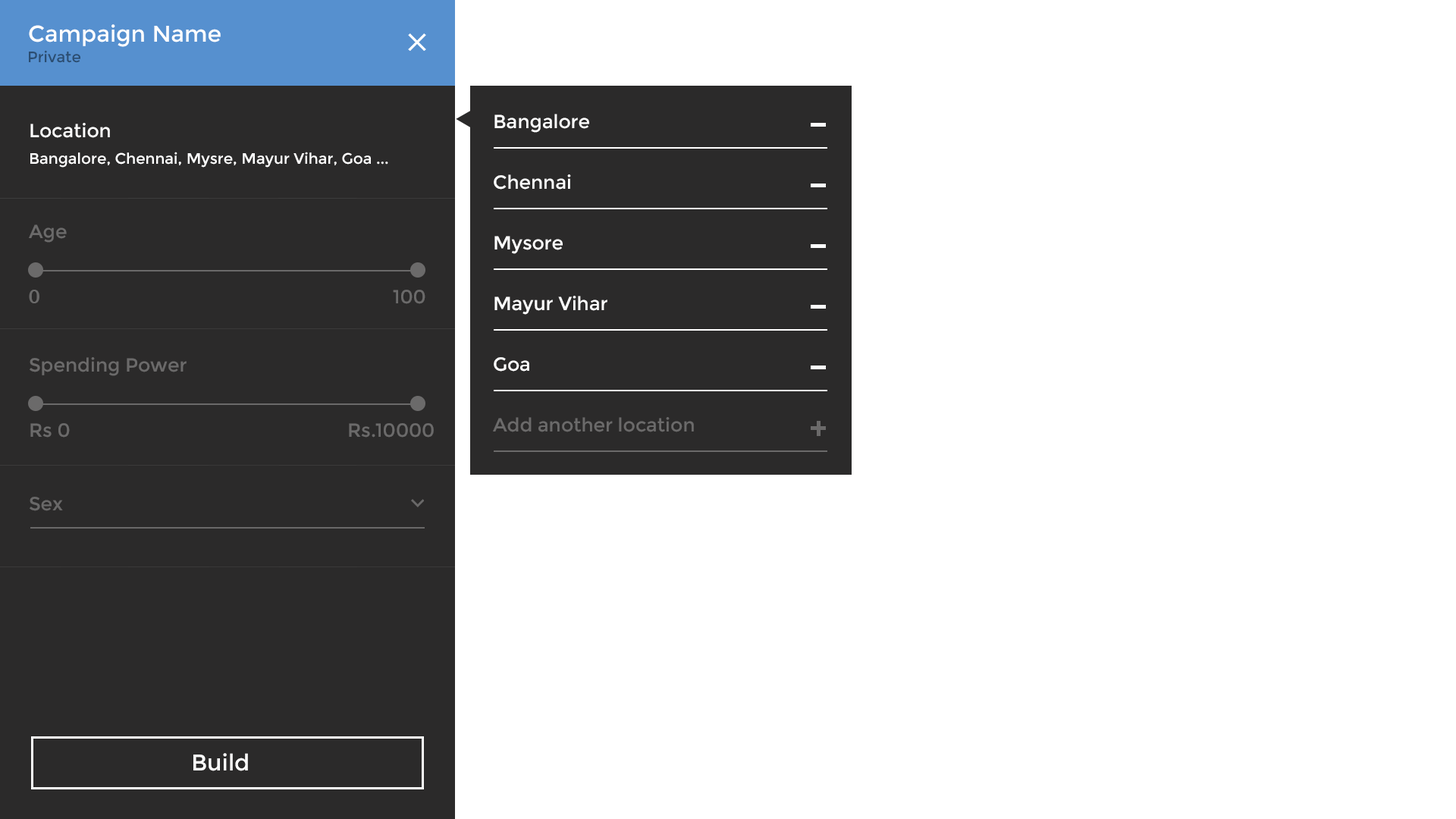
<style>
.page{position:relative;width:1456px;height:819px;background:#ffffff}
.page>*{position:absolute;margin:0}
.t1{font:22.7px "Montserrat-Regular";color:#ffffff}
.t2{font:15.2px "Montserrat-Regular";color:#2b4d71}
.t3{font:19px "Montserrat-Regular";color:#ffffff}
.t4{font:15.2px "Montserrat-Regular";color:#ffffff}
.t5{font:19px "Montserrat-Regular";color:#6b6a6a}
.t6{font:19px "Lato-Bold";color:#6b6a6a}
.t7{font:19px "Montserrat-Regular";color:#696868}
</style>
<div class="page">
<p class="t1" style="left:29px;top:24px;width:192px;height:23px">Campaign Name</p>
<p class="t2" style="left:29px;top:50px;width:51px;height:13px">Private</p>
<p class="t3" style="left:494px;top:114px;width:95px;height:19px">Bangalore</p>
<p class="t3" style="left:30px;top:123px;width:80px;height:15px">Location</p>
<p class="t4" style="left:30px;top:152px;width:358px;height:16px">Bangalore, Chennai, Mysre, Mayur Vihar, Goa ...</p>
<p class="t3" style="left:494px;top:174px;width:77px;height:16px">Chennai</p>
<p class="t5" style="left:29px;top:224px;width:38px;height:19px">Age</p>
<p class="t3" style="left:494px;top:236px;width:69px;height:18px">Mysore</p>
<p class="t6" style="left:29px;top:290px;width:10px;height:13px">0</p>
<p class="t5" style="left:393px;top:290px;width:32px;height:14px">100</p>
<p class="t3" style="left:494px;top:296px;width:113px;height:19px">Mayur Vihar</p>
<p class="t5" style="left:30px;top:357px;width:157px;height:19px">Spending Power</p>
<p class="t3" style="left:494px;top:357px;width:35px;height:15px">Goa</p>
<p class="t5" style="left:30px;top:423px;width:40px;height:15px">Rs 0</p>
<p class="t5" style="left:349px;top:423px;width:85px;height:15px">Rs.10000</p>
<p class="t5" style="left:493px;top:417px;width:201px;height:15px">Add another location</p>
<p class="t7" style="left:30px;top:497px;width:33px;height:14px">Sex</p>
<p class="t1" style="left:193px;top:753px;width:55px;height:18px">Build</p>
</div>
